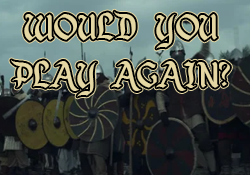
<style>
.page{position:relative;width:250px;height:175px}
.page>*{position:absolute;margin:0}
.t1{font:40.3px "EnchantedLand";color:#e4d7a3}
</style>
<div class="page">
<p class="t1" style="left:11px;top:11px;width:219px;height:86px;text-align:center">WOULD     YOU<br>PLAY    AGAIN?</p>
<p class="t1" style="left:11px;top:11px;width:219px;height:86px;text-align:center">WOULD     YOU<br>PLAY    AGAIN?</p>
</div>
